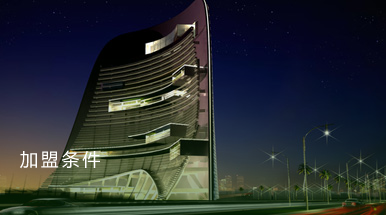
<style>
.page{position:relative;width:386px;height:215px}
.page>*{position:absolute;margin:0}
.t1{font:17.9px "MicrosoftYaHei";letter-spacing:0.16em;color:#ffffff}
</style>
<div class="page">
<p class="t1" style="left:20px;top:150px;width:80px;height:19px">加盟条件</p>
</div>
